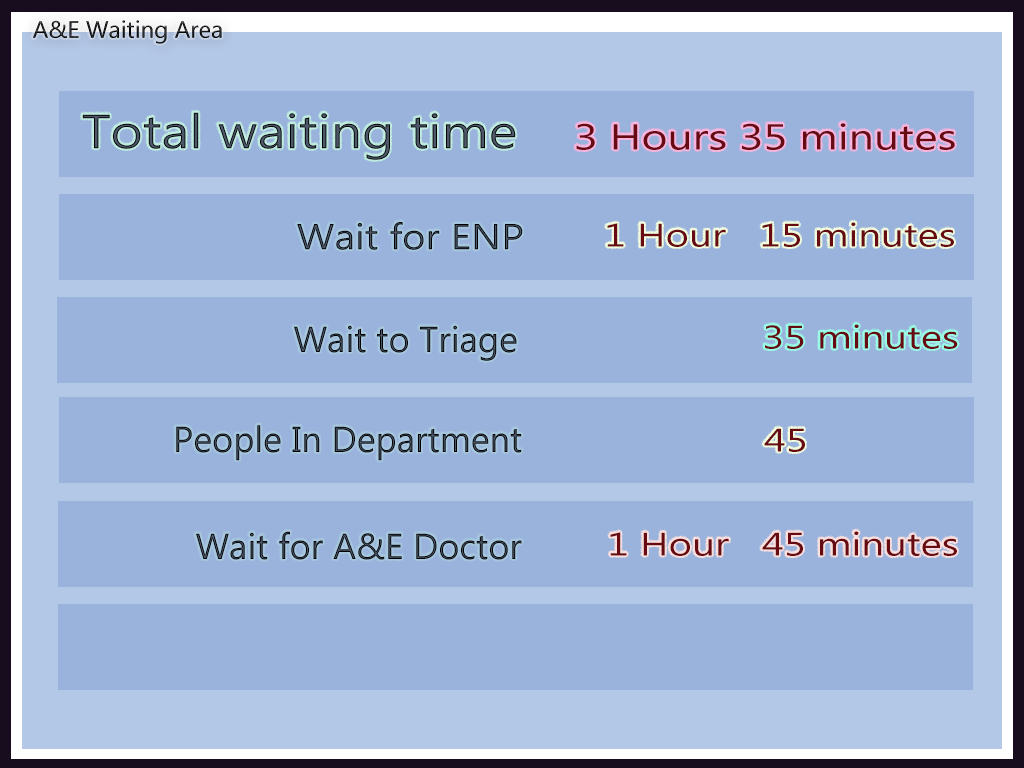
<style>
.page{position:relative;width:1024px;height:768px;background:#99b3dd}
.page>*{position:absolute;margin:0}
.t1{font:48px "MicrosoftNewTaiLue";scale:1.15 1}
.t2{font:36px "MicrosoftNewTaiLue";color:#670a12;scale:1.24 1}
.t3{font:36px "MicrosoftNewTaiLue";scale:1.12 1}
.t4{font:32.6px "MicrosoftNewTaiLue";color:#670a12;scale:1.24 1}
.t5{font:36px "MicrosoftNewTaiLue"}
</style>
<div class="page">
<p class="t1" style="left:82px;top:112px;width:434px;height:48px">Total waiting time</p>
<p class="t2" style="left:576px;top:123px;width:379px;height:27px">3 Hours 35 minutes</p>
<p class="t3" style="left:297px;top:222px;width:226px;height:28px">Wait for ENP</p>
<p class="t4" style="left:607px;top:222px;width:347px;height:25px">1 Hour   15 minutes</p>
<p class="t5" style="left:294px;top:325px;width:223px;height:36px">Wait to Triage</p>
<p class="t4" style="left:765px;top:324px;width:193px;height:25px">35 minutes</p>
<p class="t5" style="left:176px;top:425px;width:346px;height:36px">People In Department</p>
<p class="t4" style="left:764px;top:428px;width:41px;height:24px">45</p>
<p class="t5" style="left:196px;top:531px;width:326px;height:29px">Wait for A&amp;E Doctor</p>
<p class="t4" style="left:610px;top:531px;width:347px;height:25px">1 Hour   45 minutes</p>
</div>
